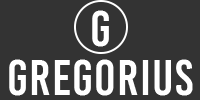
<style>
.page{position:relative;width:200px;height:100px;background:#333333}
.page>*{position:absolute;margin:0}
.t1{font:50px "BebasKai";letter-spacing:0.024em;color:#ffffff}
</style>
<div class="page">
<p class="t1" style="left:92px;top:10px;width:17px;height:37px">G</p>
<p class="t1" style="left:9px;top:59px;width:184px;height:37px">Gregorius</p>
</div>
